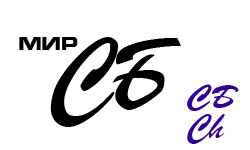
<style>
.page{position:relative;width:250px;height:150px;background:#ffffff}
.page>*{position:absolute;margin:0}
.t1{font:18px "Micra-Bold";letter-spacing:-0.1em;color:#000000}
.t2{font:100px "ParsekCyrillic";letter-spacing:-0.1em;color:#000000}
.t3{font:36px/30px "BrushScriptUkrainLight";color:#330099}
.t4{font:36px/30px "ParsekCyrillic";color:#330099}
</style>
<div class="page">
<p class="t1" style="left:19px;top:37px;width:59px;height:13px">МИР</p>
<p class="t2" style="left:50px;top:37px;width:131px;height:90px">СБ</p>
<p class="t3" style="left:187px;top:84px;width:52px;height:60px;text-align:justify">СБ<br><span class="t4">Ch</span></p>
</div>
